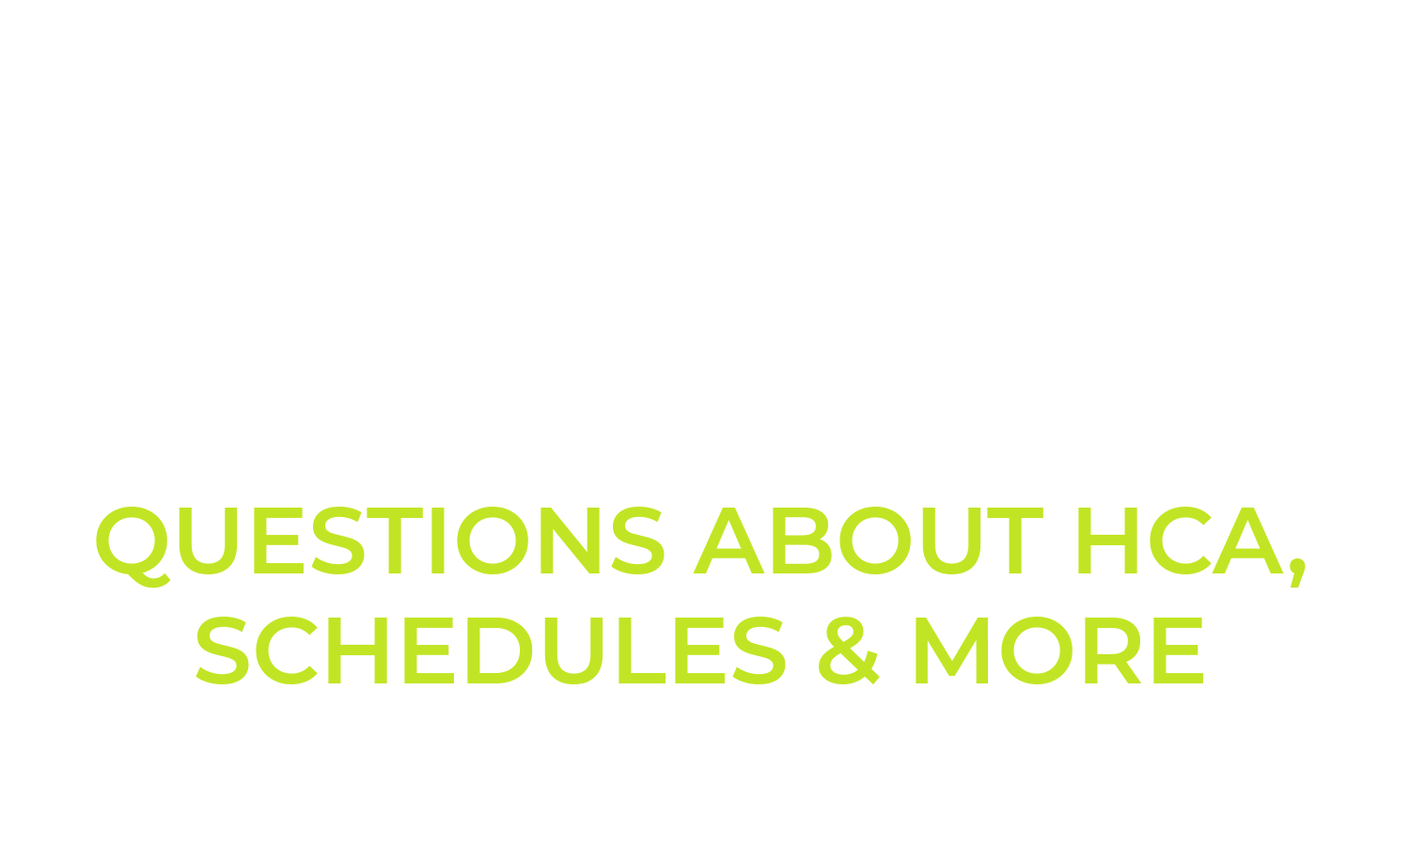
<style>
.page{position:relative;width:1410px;height:846px;background:#ffffff}
.page>*{position:absolute;margin:0}
.t1{font:94px/0.2px "Montserrat-SemiBold";color:#c1e524;text-transform:uppercase}
</style>
<div class="page">
<p class="t1" style="left:96px;top:507px;width:1209px;height:178px;text-align:center">questions about hca,<br>schedules &amp; more</p>
</div>
